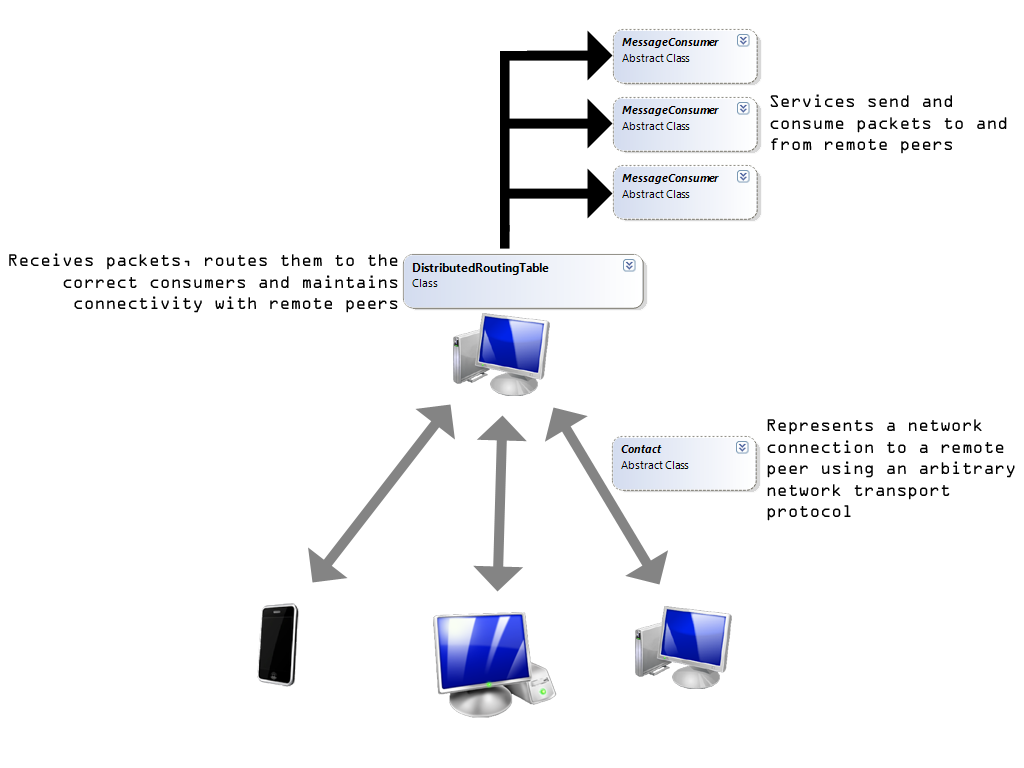
<style>
.page{position:relative;width:1024px;height:768px;background:#ffffff}
.page>*{position:absolute;margin:0}
.t1{font:18px "OCRAExtended";color:#000000}
</style>
<div class="page">
<p class="t1" style="left:770px;top:94px;width:237px;height:60px">Services send and<br>consume packets to and<br>from remote peers</p>
<p class="t1" style="left:9px;top:253px;width:389px;height:60px;text-align:right">Receives packets, routes them to the<br>correct consumers and maintains<br>connectivity with remote peers</p>
<p class="t1" style="left:767px;top:419px;width:248px;height:102px">Represents a network<br>connection to a remote<br>peer using an arbitrary<br>network transport<br>protocol</p>
</div>
